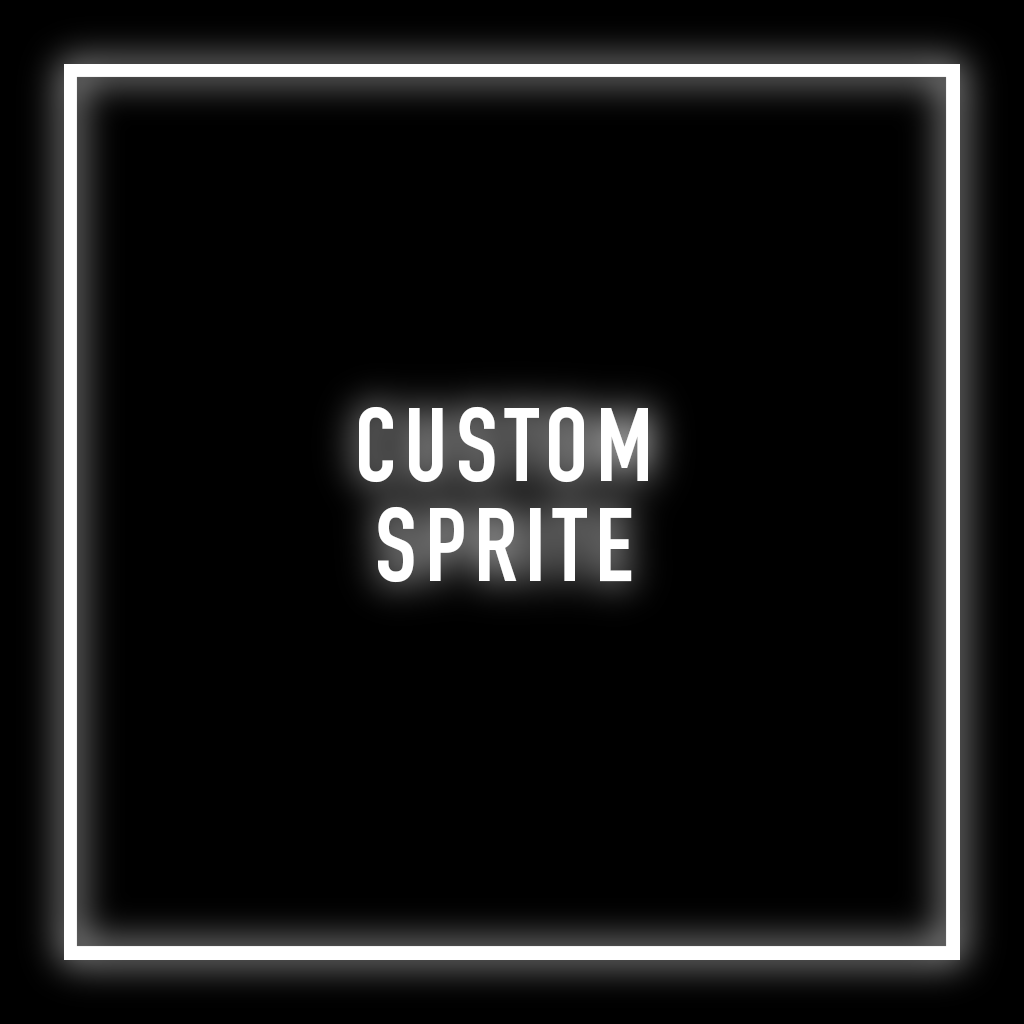
<style>
.page{position:relative;width:1024px;height:1024px;background:#000000}
.page>*{position:absolute;margin:0}
.t1{font:102px/100px "DINEngschriftStd";letter-spacing:0.075em;color:#ffffff;text-transform:uppercase}
</style>
<div class="page">
<p class="t1" style="left:359px;top:406px;width:289px;height:177px;text-align:center">CUSTOM<br>SPRITE</p>
</div>
